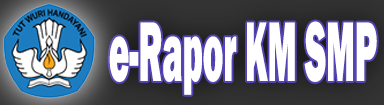
<style>
.page{position:relative;width:384px;height:105px;background:#ffffff}
.page>*{position:absolute;margin:0}
.t1{font:87.4px "FranklinGothic-Heavy";color:#ffffff;scale:0.39 1}
</style>
<div class="page">
<p class="t1" style="left:109px;top:21px;width:268px;height:74px">e-Rapor KM SMP</p>
</div>
